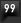
<style>
.page{position:relative;width:21px;height:23px}
.page>*{position:absolute;margin:0}
.t1{font:11px "DINMittelschriftStd";letter-spacing:0.01em;color:#ffffff;font-weight:bold}
</style>
<div class="page">
<p class="t1" style="left:4px;top:4px;width:11px;height:9px">99</p>
</div>
